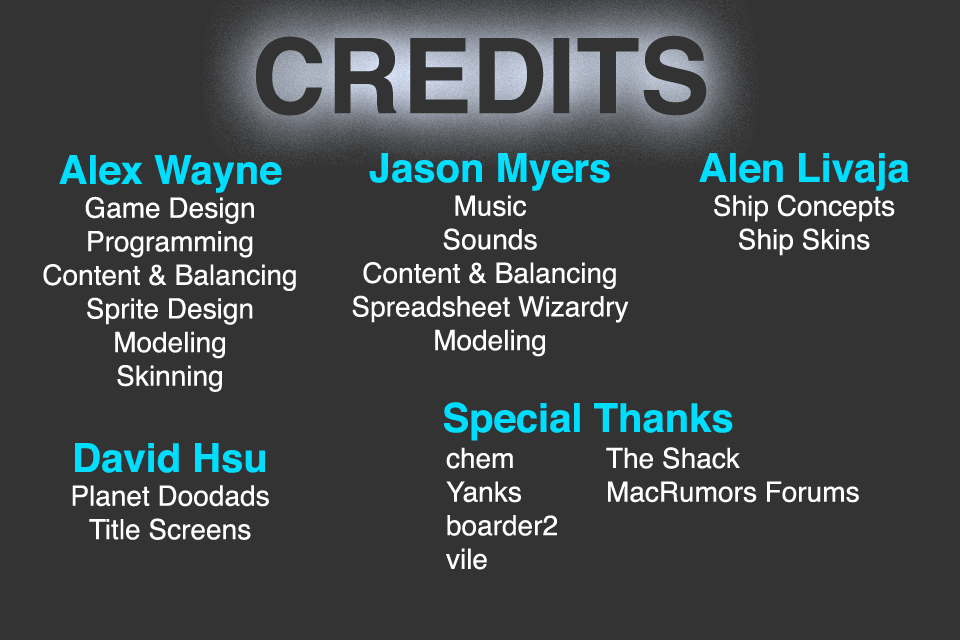
<style>
.page{position:relative;width:960px;height:640px;background:#333333}
.page>*{position:absolute;margin:0}
.t1{font:104.3px "Helvetica-Bold";color:#333333}
.t2{font:28px "Helvetica";color:#ffffff}
.t3{font:40px "Helvetica-Bold";color:#00deff}
</style>
<div class="page">
<p class="t1" style="left:256px;top:35px;width:451px;height:81px">CREDITS</p>
<p class="t2" style="left:43px;top:155px;width:253px;height:237px;text-align:center"><span class="t3">Alex Wayne<br></span>Game Design<br>Programming<br>Content &amp; Balancing<br>Sprite Design<br>Modeling<br>Skinning</p>
<p class="t2" style="left:352px;top:153px;width:277px;height:204px;text-align:center"><span class="t3">Jason Myers<br></span>Music<br>Sounds<br>Content &amp; Balancing<br>Spreadsheet Wizardry<br>Modeling</p>
<p class="t2" style="left:699px;top:153px;width:210px;height:103px;text-align:center"><span class="t3">Alen Livaja<br></span>Ship Concepts<br>Ship Skins</p>
<p class="t3" style="left:444px;top:402px;width:289px;height:39px">Special Thanks</p>
<p class="t2" style="left:72px;top:443px;width:197px;height:97px;text-align:center"><span class="t3">David Hsu<br></span>Planet Doodads<br>Title Screens</p>
<p class="t2" style="left:446px;top:447px;width:111px;height:123px">chem<br>Yanks<br>boarder2<br>vile</p>
<p class="t2" style="left:606px;top:447px;width:253px;height:56px">The Shack<br>MacRumors Forums</p>
</div>
